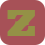
<style>
.page{position:relative;width:45px;height:45px;background:#a75157}
.page>*{position:absolute;margin:0}
.t1{font:50px "Saddlebag-Black";color:#949146}
</style>
<div class="page">
<p class="t1" style="left:7px;top:10px;width:28px;height:26px">Z</p>
</div>
